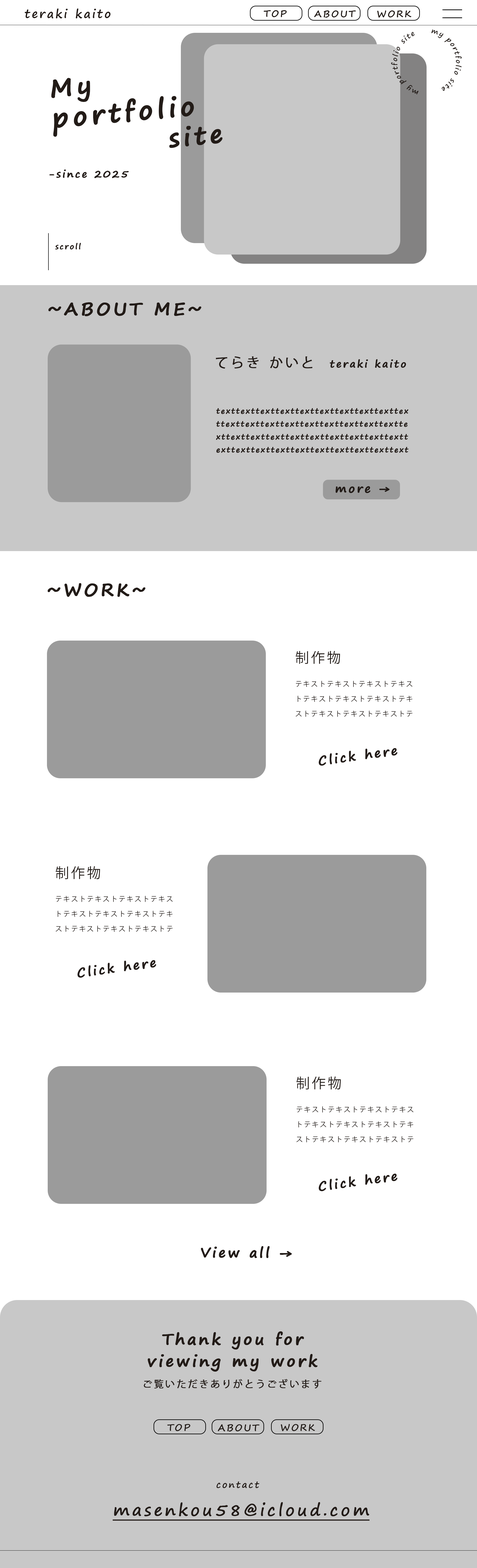
<style>
.page{position:relative;width:477px;height:1568px;background:#ffffff}
.page>*{position:absolute;margin:0}
.t1{font:11.7px "SegoePrint-Bold";letter-spacing:0.14em;color:#221b17}
.t2{font:9.4px "SegoePrint-Bold";letter-spacing:0.14em;color:#221b17}
.t3{font:7px/30.3px "SegoePrint-Bold";letter-spacing:0.14em;color:#221b17}
.t4{font:25.6px/29.8px "SegoePrint-Bold";letter-spacing:0.14em;color:#221b17;font-weight:bold}
.t5{font:24.5px/29.8px "SegoePrint-Bold";letter-spacing:0.14em;color:#221b17;font-weight:bold}
.t6{font:9.9px "SegoePrint-Bold";letter-spacing:0.14em;color:#221b17;font-weight:bold}
.t7{font:7.5px "SegoePrint-Bold";letter-spacing:0.14em;color:#221b17;font-weight:bold}
.t8{font:17.4px "SegoePrint-Bold";letter-spacing:0.14em;color:#221b17;font-weight:bold}
.t9{font:13.4px "KozGoPr6N-Regular";letter-spacing:0.14em;color:#221b17;font-weight:bold}
.t10{font:7.5px/12.9px "SegoePrint-Bold";letter-spacing:0.14em;color:#221b17;font-weight:bold}
.t11{font:11.4px "SegoePrint-Bold";letter-spacing:0.14em;color:#221b17;font-weight:bold}
.t12{font:7px/14.9px "KozGoPr6N-Regular";letter-spacing:0.14em;color:#221b17}
.t13{font:13.9px/14.9px "KozGoPr6N-Regular";letter-spacing:0.14em;color:#221b17}
.t14{font:12.4px "SegoePrint-Bold";letter-spacing:0.14em;color:#221b17;font-weight:bold}
.t15{font:13.4px "SegoePrint-Bold";letter-spacing:0.14em;color:#221b17;font-weight:bold}
.t16{font:15.4px/21.9px "SegoePrint-Bold";letter-spacing:0.14em;color:#221b17;font-weight:bold}
.t17{font:9.7px "KozGoPr6N-Regular";letter-spacing:0.14em;color:#221b17;font-weight:bold}
.t18{font:9.5px "SegoePrint-Bold";letter-spacing:0.14em;color:#221b17}
.t19{font:8.9px "SegoePrint";letter-spacing:0.14em;color:#221b17;font-weight:bold}
.t20{font:16.2px "SegoePrint";letter-spacing:0.14em;color:#221b17;font-weight:bold;text-decoration:underline}
</style>
<div class="page">
<p class="t1" style="left:25px;top:8px;width:86px;height:10px">teraki kaito</p>
<p class="t2" style="left:264px;top:10px;width:23px;height:7px">TOP</p>
<p class="t2" style="left:314px;top:10px;width:42px;height:8px">ABOUT</p>
<p class="t2" style="left:377px;top:10px;width:35px;height:8px">WORK</p>
<p class="t3" style="left:391px;top:29px;width:71px;height:65px">my portfolio site    my portfolio site</p>
<p class="t4" style="left:51px;top:78px;width:172px;height:70px;rotate:-5deg"><span class="t5">My<br></span>portfolio<br>　　　　<span class="t5">site</span></p>
<p class="t6" style="left:49px;top:170px;width:80px;height:8px">-since 2025</p>
<p class="t7" style="left:55px;top:243px;width:26px;height:7px">scroll</p>
<p class="t8" style="left:48px;top:302px;width:154px;height:14px">~ABOUT ME~</p>
<p class="t9" style="left:216px;top:356px;width:97px;height:13px">てらき かいと</p>
<p class="t6" style="left:330px;top:359px;width:76px;height:9px">teraki kaito</p>
<p class="t10" style="left:216px;top:408px;width:193px;height:45px">texttexttexttexttexttexttexttexttexttexttexttexttexttexttexttexttexttexttexttexttexttexttexttexttexttexttexttexttexttexttexttexttexttexttexttexttexttexttexttexttexttext</p>
<p class="t11" style="left:336px;top:486px;width:54px;height:7px">more →</p>
<p class="t8" style="left:47px;top:583px;width:99px;height:14px">~WORK~</p>
<p class="t12" style="left:296px;top:651px;width:117px;height:66px"><span class="t13">制作物<br><br></span>テキストテキストテキストテキストテキストテキストテキストテキストテキストテキストテキストテキストテキストテキストテキスト</p>
<p class="t14" style="left:319px;top:748px;width:79px;height:18px;rotate:-8deg">Click here</p>
<p class="t12" style="left:56px;top:866px;width:117px;height:66px"><span class="t13">制作物<br><br></span>テキストテキストテキストテキストテキストテキストテキストテキストテキストテキストテキストテキストテキストテキストテキスト</p>
<p class="t14" style="left:78px;top:960px;width:78px;height:18px;rotate:-8deg">Click here</p>
<p class="t12" style="left:297px;top:1076px;width:117px;height:66px"><span class="t13">制作物<br><br></span>テキストテキストテキストテキストテキストテキストテキストテキストテキストテキストテキストテキストテキストテキストテキスト</p>
<p class="t14" style="left:319px;top:1174px;width:79px;height:17px;rotate:-8deg">Click here</p>
<p class="t15" style="left:201px;top:1246px;width:91px;height:12px">View all →</p>
<p class="t16" style="left:148px;top:1331px;width:170px;height:41px;text-align:center">Thank you for<br>viewing my work</p>
<p class="t17" style="left:144px;top:1379px;width:178px;height:10px">ご覧いただきありがとうございます</p>
<p class="t18" style="left:167px;top:1424px;width:23px;height:7px">TOP</p>
<p class="t18" style="left:218px;top:1424px;width:42px;height:8px">ABOUT</p>
<p class="t18" style="left:281px;top:1424px;width:34px;height:7px">WORK</p>
<p class="t19" style="left:217px;top:1481px;width:43px;height:7px">contact</p>
<p class="t20" style="left:113px;top:1502px;width:257px;height:19px">masenkou58@icloud.com</p>
</div>
